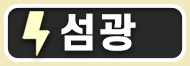
<style>
.page{position:relative;width:190px;height:66px}
.page>*{position:absolute;margin:0}
.t1{font:39px "S-CoreDream-6Bold";color:#fefefe;font-weight:bold}
</style>
<div class="page">
<p class="t1" style="left:61px;top:13px;width:75px;height:38px">섬광</p>
</div>
